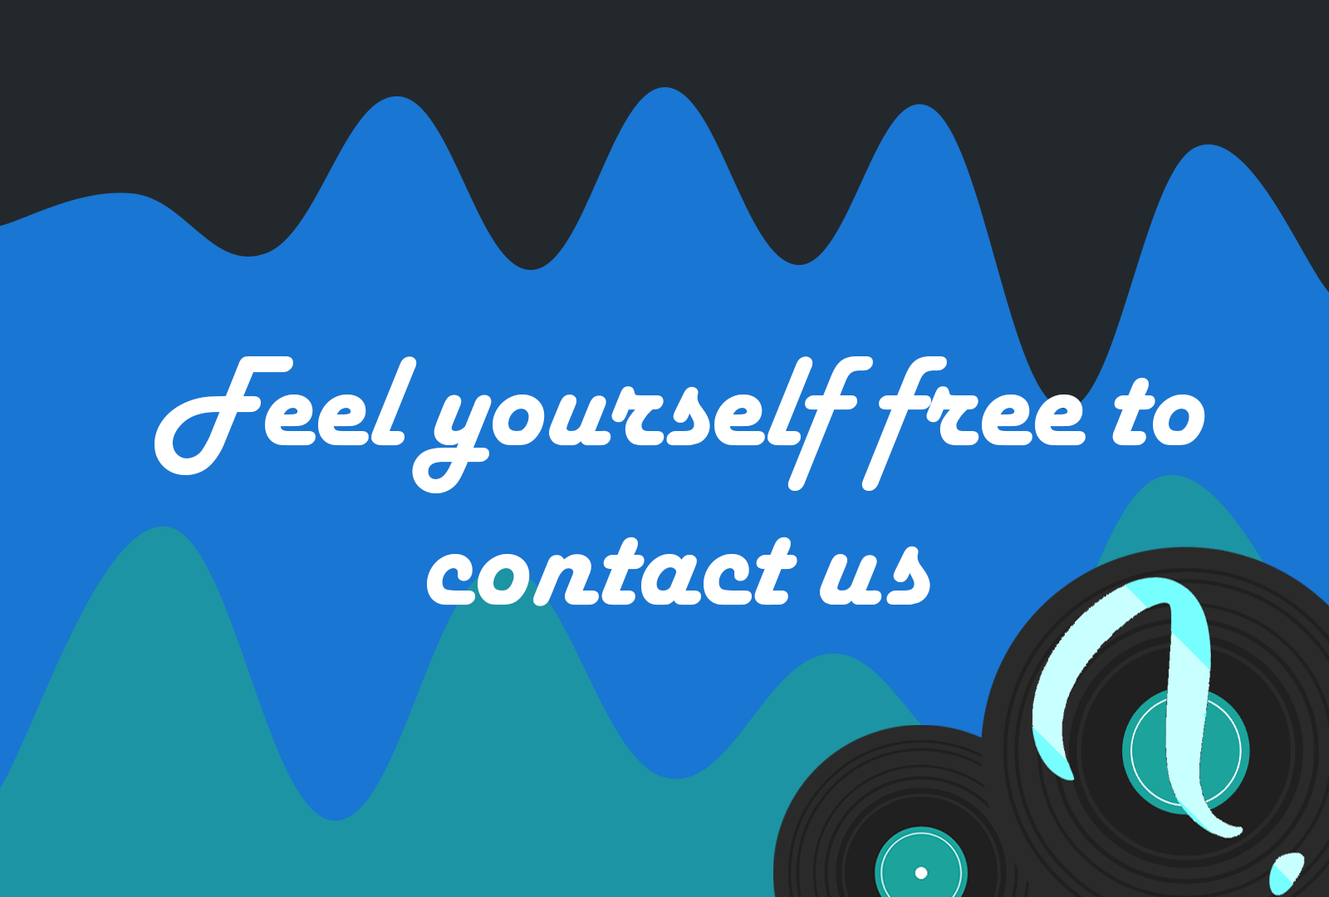
<style>
.page{position:relative;width:1329px;height:897px;background:#1976d2}
.page>*{position:absolute;margin:0}
.t1{font:132.9px "HarlowSolidPlain";color:#ffffff}
</style>
<div class="page">
<p class="t1" style="left:155px;top:356px;width:1050px;height:250px;text-align:center">Feel yourself free to contact us</p>
</div>
